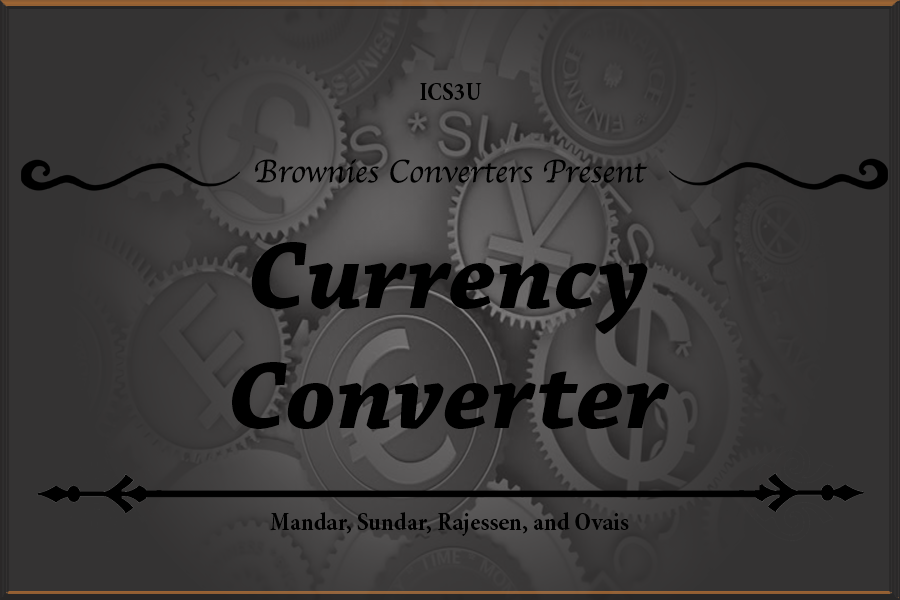
<style>
.page{position:relative;width:900px;height:600px;background:#343333}
.page>*{position:absolute;margin:0}
.t1{font:25px "MinionPro-BoldCn";color:#000000}
.t2{font:33.3px "Apple-Chancery";color:#000000}
.t3{font:100px "ChaparralPro-BoldIt";color:#000000}
</style>
<div class="page">
<p class="t1" style="left:420px;top:83px;width:62px;height:17px">ICS3U</p>
<p class="t2" style="left:255px;top:159px;width:393px;height:24px">Brownies Converters Present</p>
<p class="t3" style="left:232px;top:242px;width:437px;height:187px;text-align:center">Currency<br>Converter</p>
<p class="t1" style="left:270px;top:512px;width:359px;height:24px">Mandar, Sundar, Rajessen, and Ovais</p>
</div>
